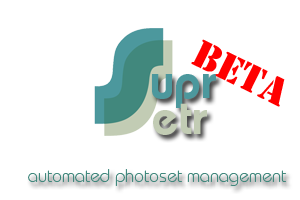
<style>
.page{position:relative;width:300px;height:200px;background:#ffffff}
.page>*{position:absolute;margin:0}
.t1{font:36px "StencilStd";color:#ff0000}
.t2{font:48px "BauhausStd-Demi";color:#4c989d}
.t3{font:18px "BauhausStd-Light";color:#41887d}
</style>
<div class="page">
<p class="t1" style="left:191px;top:39px;width:94px;height:68px;rotate:26deg">BETA</p>
<p class="t2" style="left:152px;top:74px;width:64px;height:34px">upr</p>
<p class="t3" style="left:28px;top:169px;width:258px;height:17px">automated photoset management</p>
</div>
